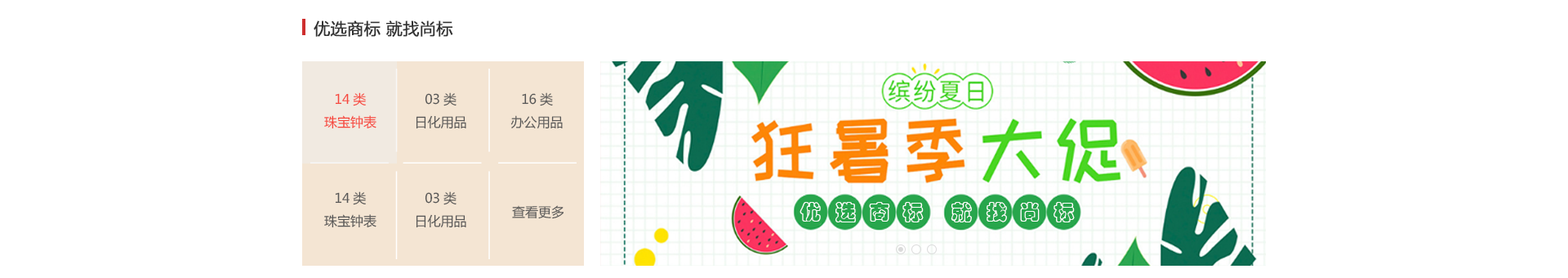
<style>
.page{position:relative;width:1568px;height:278px;background:#ffffff}
.page>*{position:absolute;margin:0}
.t1{font:16.3px "MicrosoftYaHei";color:#323232;font-weight:bold}
.t2{font:13.1px "MicrosoftYaHei";color:#f6463c}
.t3{font:13.1px "MicrosoftYaHei";color:#565656}
.t4{font:21.1px "STCaiyun";color:#ffffff}
</style>
<div class="page">
<p class="t1" style="left:314px;top:20px;width:139px;height:17px">优选商标 就找尚标</p>
<p class="t2" style="left:324px;top:92px;width:52px;height:37px;text-align:center">14类<br>珠宝钟表</p>
<p class="t3" style="left:416px;top:92px;width:50px;height:37px;text-align:center">03类<br>日化用品</p>
<p class="t3" style="left:510px;top:92px;width:53px;height:37px;text-align:center">16类<br>办公用品</p>
<p class="t3" style="left:324px;top:191px;width:52px;height:37px;text-align:center">14类<br>珠宝钟表</p>
<p class="t3" style="left:416px;top:191px;width:50px;height:37px;text-align:center">03类<br>日化用品</p>
<p class="t3" style="left:512px;top:205px;width:52px;height:14px">查看更多</p>
<p class="t4" style="left:800px;top:202px;width:21px;height:19px">优</p>
<p class="t4" style="left:835px;top:202px;width:21px;height:20px">选</p>
<p class="t4" style="left:869px;top:202px;width:21px;height:19px">商</p>
<p class="t4" style="left:902px;top:202px;width:22px;height:20px">标</p>
<p class="t4" style="left:951px;top:202px;width:21px;height:20px">就</p>
<p class="t4" style="left:986px;top:202px;width:21px;height:20px">找</p>
<p class="t4" style="left:1020px;top:202px;width:20px;height:19px">尚</p>
<p class="t4" style="left:1054px;top:202px;width:21px;height:20px">标</p>
</div>
